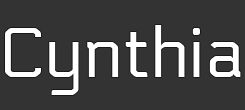
<style>
.page{position:relative;width:245px;height:110px;background:#333333}
.page>*{position:absolute;margin:0}
.t1{font:70px "Electrolize-Regular";letter-spacing:0.01em;color:#ffffff}
</style>
<div class="page">
<p class="t1" style="left:5px;top:25px;width:236px;height:70px">Cynthia</p>
</div>
